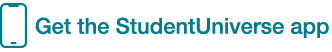
<style>
.page{position:relative;width:332px;height:52px;background:#ffffff}
.page>*{position:absolute;margin:0}
.t1{font:22px "HelveticaNeue-Medium";color:#007c8a}
</style>
<div class="page">
<p class="t1" style="left:35px;top:17px;width:294px;height:21px">Get the StudentUniverse app</p>
</div>
